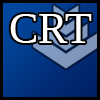
<style>
.page{position:relative;width:100px;height:100px}
.page>*{position:absolute;margin:0}
.t1{font:44px "LiberationSerif";color:#ffffff}
</style>
<div class="page">
<p class="t1" style="left:10px;top:14px;width:82px;height:29px">CRT</p>
</div>
